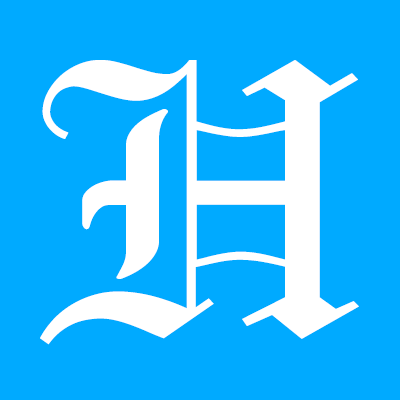
<style>
.page{position:relative;width:400px;height:400px;background:#00aaff}
.page>*{position:absolute;margin:0}
.t1{font:392px "holyunion";color:#ffffff}
</style>
<div class="page">
<p class="t1" style="left:40px;top:60px;width:319px;height:285px">H</p>
</div>
